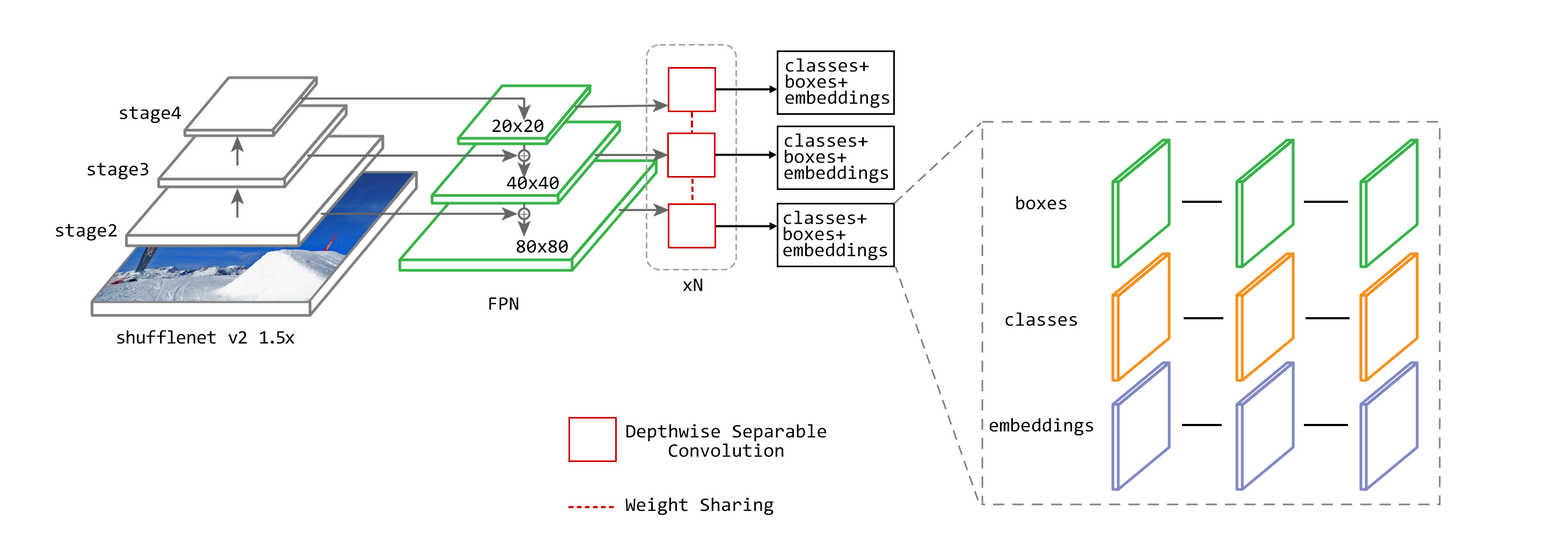
<style>
.page{position:relative;width:1568px;height:557px;background:#ffffff}
.page>*{position:absolute;margin:0}
.t1{font:19.3px/16.1px "Consolas";color:#000000}
.t2{font:19.3px "Consolas";color:#000000}
.t3{font:19.3px/19.3px "Consolas";color:#000000}
</style>
<div class="page">
<p class="t1" style="left:785px;top:58px;width:104px;height:50px">classes+<br>boxes+<br>embeddings</p>
<p class="t2" style="left:120px;top:106px;width:61px;height:17px">stage4</p>
<p class="t2" style="left:492px;top:119px;width:52px;height:14px">20x20</p>
<p class="t1" style="left:784px;top:133px;width:104px;height:50px">classes+<br>boxes+<br>embeddings</p>
<p class="t2" style="left:87px;top:163px;width:62px;height:17px">stage3</p>
<p class="t2" style="left:507px;top:177px;width:52px;height:12px">40x40</p>
<p class="t2" style="left:1016px;top:196px;width:51px;height:14px">boxes</p>
<p class="t1" style="left:783px;top:210px;width:104px;height:50px">classes+<br>boxes+<br>embeddings</p>
<p class="t2" style="left:56px;top:224px;width:61px;height:17px">stage2</p>
<p class="t2" style="left:516px;top:240px;width:52px;height:13px">80x80</p>
<p class="t2" style="left:683px;top:279px;width:20px;height:12px">xN</p>
<p class="t2" style="left:489px;top:297px;width:30px;height:13px">FPN</p>
<p class="t2" style="left:1005px;top:312px;width:72px;height:14px">classes</p>
<p class="t2" style="left:117px;top:330px;width:178px;height:14px">shufflenet v2 1.5x</p>
<p class="t3" style="left:626px;top:424px;width:200px;height:33px;text-align:center">Depthwise Separable<br>Convolution</p>
<p class="t2" style="left:989px;top:418px;width:104px;height:18px">embeddings</p>
<p class="t2" style="left:625px;top:498px;width:149px;height:17px">Weight Sharing</p>
</div>
